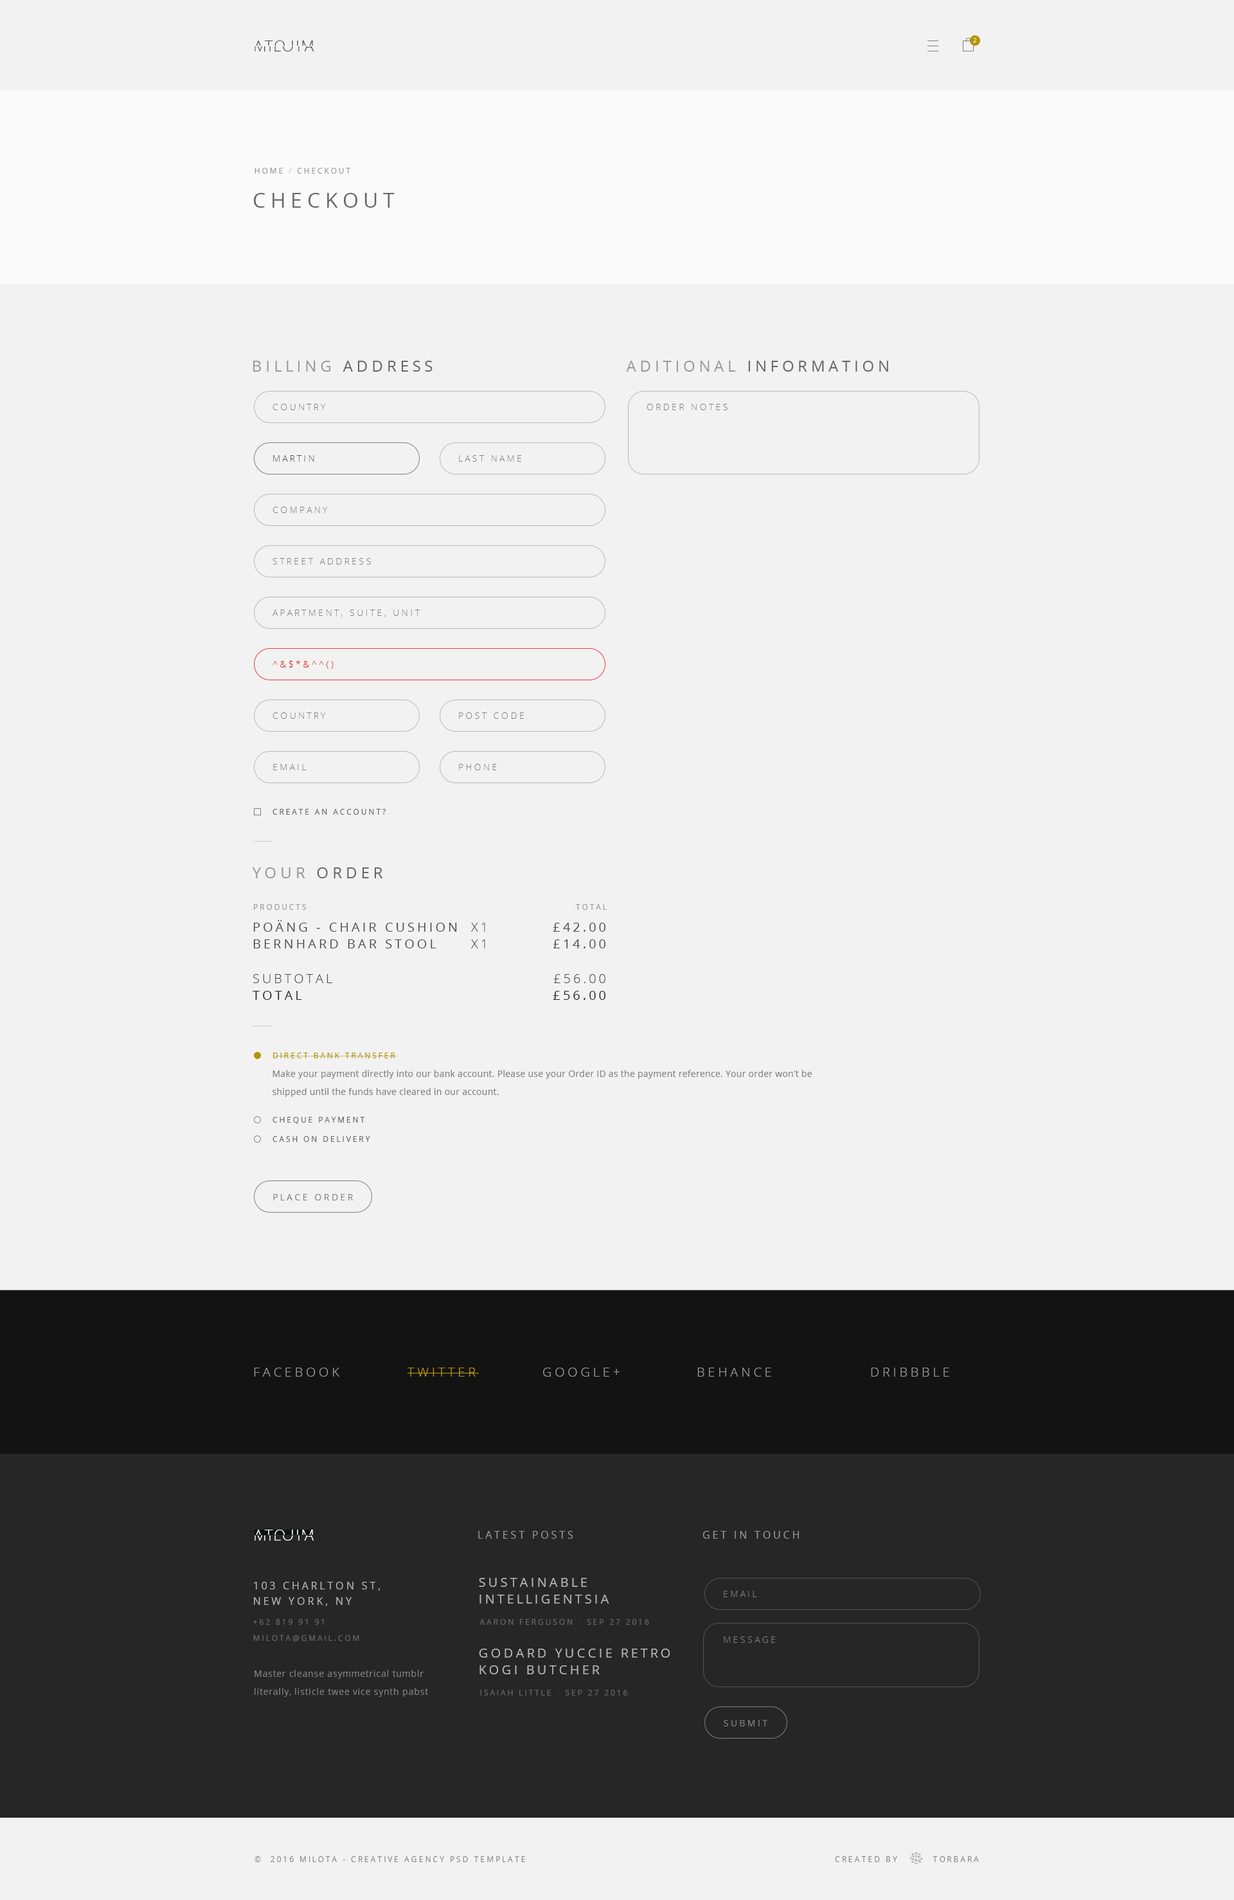
<style>
.page{position:relative;width:1234px;height:1900px;background:#f2f2f2}
.page>*{position:absolute;margin:0}
.t1{font:15.4px "OpenSans-Light";letter-spacing:0.08em;text-transform:uppercase}
.t2{font:6.4px "OpenSans-Light";letter-spacing:0.28em;color:#ffffff;text-transform:uppercase}
.t3{font:7.7px "OpenSans";letter-spacing:0.24em;color:#999999;text-transform:uppercase}
.t4{font:7.7px "OpenSans";letter-spacing:0.24em;color:#cccccc;text-transform:uppercase}
.t5{font:20.6px "OpenSans";letter-spacing:0.24em;color:#666666;text-transform:uppercase}
.t6{font:15.4px "OpenSans";letter-spacing:0.24em;color:#999999;text-transform:uppercase}
.t7{font:15.4px "OpenSans";letter-spacing:0.24em;color:#666666;text-transform:uppercase}
.t8{font:9px "OpenSans-Light";letter-spacing:0.24em;color:#808080;text-transform:uppercase}
.t9{font:9px "OpenSans-Light";letter-spacing:0.24em;color:#4d4d4d;text-transform:uppercase}
.t10{font:9px "OpenSans-Light";letter-spacing:0.24em;color:#e60000;text-transform:uppercase}
.t11{font:7.7px "OpenSans";letter-spacing:0.24em;color:#666666;text-transform:uppercase}
.t12{font:12.9px/16.7px "OpenSans";letter-spacing:0.2em;color:#4d4d4d;text-transform:uppercase}
.t13{font:12.9px/16.7px "OpenSans-Light";letter-spacing:0.2em;color:#4d4d4d;text-transform:uppercase}
.t14{font:12.9px/16.7px "OpenSans";letter-spacing:0.2em;color:#262626;text-transform:uppercase}
.t15{font:7.7px "OpenSans";letter-spacing:0.24em;color:#b39500;text-transform:uppercase}
.t16{font:9px/18px "OpenSans";letter-spacing:0.02em;color:#808080}
.t17{font:9px "OpenSans";letter-spacing:0.24em;color:#808080;text-transform:uppercase}
.t18{font:12.9px "OpenSans-Light";letter-spacing:0.24em;color:#999999;text-transform:uppercase}
.t19{font:12.9px "OpenSans-Light";letter-spacing:0.24em;color:#b39500;text-transform:uppercase}
.t20{font:10.3px "OpenSans";letter-spacing:0.24em;color:#999999;text-transform:uppercase}
.t21{font:12.9px/16.7px "OpenSans";letter-spacing:0.2em;color:#b3b3b3;text-transform:uppercase}
.t22{font:10.3px/15.4px "OpenSans";letter-spacing:0.24em;color:#b3b3b3;text-transform:uppercase}
.t23{font:7.7px "OpenSans";letter-spacing:0.24em;color:#333333;text-transform:uppercase}
.t24{font:9px/18px "OpenSans";letter-spacing:0.04em;color:#808080}
.t25{font:7.7px "OpenSans";letter-spacing:0.24em;color:#808080;text-transform:uppercase}
</style>
<div class="page">
<p class="t1" style="left:254px;top:40px;width:59px;height:11px;rotate:180deg">milota</p>
<p class="t1" style="left:255px;top:40px;width:59px;height:11px">milota</p>
<p class="t2" style="left:973px;top:38px;width:4px;height:4px">2</p>
<p class="t3" style="left:255px;top:168px;width:96px;height:6px">home <span class="t4">/</span> Checkout</p>
<p class="t5" style="left:254px;top:193px;width:141px;height:15px">Checkout</p>
<p class="t6" style="left:253px;top:361px;width:180px;height:11px">Billing <span class="t7">Address</span></p>
<p class="t7" style="left:626px;top:361px;width:262px;height:11px"><span class="t6">Aditional </span>information</p>
<p class="t8" style="left:273px;top:404px;width:53px;height:6px">Country</p>
<p class="t8" style="left:647px;top:404px;width:81px;height:6px">Order Notes</p>
<p class="t9" style="left:273px;top:455px;width:41px;height:7px">Martin</p>
<p class="t8" style="left:459px;top:455px;width:62px;height:7px">Last name</p>
<p class="t8" style="left:273px;top:507px;width:55px;height:6px">Company</p>
<p class="t8" style="left:273px;top:558px;width:98px;height:6px">Street address</p>
<p class="t8" style="left:273px;top:609px;width:147px;height:8px">Apartment, suite, unit</p>
<p class="t10" style="left:273px;top:660px;width:61px;height:9px">^&amp;$*&amp;^^()</p>
<p class="t8" style="left:273px;top:712px;width:53px;height:7px">Country</p>
<p class="t8" style="left:459px;top:712px;width:65px;height:7px">Post code</p>
<p class="t8" style="left:273px;top:764px;width:34px;height:6px">Email</p>
<p class="t8" style="left:459px;top:764px;width:38px;height:6px">Phone</p>
<p class="t11" style="left:273px;top:809px;width:113px;height:6px">Create an account?</p>
<p class="t7" style="left:252px;top:867px;width:130px;height:11px"><span class="t6">Your </span>Order</p>
<p class="t3" style="left:254px;top:904px;width:52px;height:6px">Products</p>
<p class="t3" style="left:576px;top:904px;width:31px;height:6px">Total</p>
<p class="t12" style="left:253px;top:920px;width:204px;height:28px">POÄNG - Chair cushion<br>BERNHARD Bar stool</p>
<p class="t13" style="left:471px;top:923px;width:14px;height:25px">x1<br>x1</p>
<p class="t12" style="left:554px;top:923px;width:52px;height:25px;text-align:right">£42.00<br>£14.00</p>
<p class="t13" style="left:253px;top:974px;width:79px;height:26px">Subtotal<br><span class="t14">Total</span></p>
<p class="t13" style="left:554px;top:974px;width:52px;height:26px;text-align:right">£56.00<br><span class="t14">£56.00</span></p>
<p class="t15" style="left:273px;top:1052px;width:124px;height:6px">Direct Bank Transfer</p>
<p class="t16" style="left:273px;top:1070px;width:539px;height:27px">Make your payment directly into our bank account. Please use your Order ID as the payment reference. Your order won’t be shipped until the funds have cleared in our account.</p>
<p class="t11" style="left:273px;top:1117px;width:92px;height:7px">Cheque Payment</p>
<p class="t11" style="left:273px;top:1136px;width:97px;height:6px">Cash on Delivery</p>
<p class="t17" style="left:273px;top:1194px;width:80px;height:6px">Place order</p>
<p class="t18" style="left:254px;top:1367px;width:85px;height:9px">facebook</p>
<p class="t19" style="left:408px;top:1367px;width:71px;height:9px">Twitter</p>
<p class="t18" style="left:543px;top:1367px;width:77px;height:9px">Google+</p>
<p class="t18" style="left:698px;top:1367px;width:73px;height:9px">Behance</p>
<p class="t18" style="left:871px;top:1367px;width:79px;height:9px">dribbble</p>
<p class="t1" style="left:254px;top:1529px;width:59px;height:11px;rotate:180deg">milota</p>
<p class="t1" style="left:255px;top:1529px;width:59px;height:11px">milota</p>
<p class="t20" style="left:478px;top:1531px;width:95px;height:7px">Latest posts</p>
<p class="t20" style="left:703px;top:1531px;width:96px;height:7px">Get in touch</p>
<p class="t21" style="left:479px;top:1578px;width:130px;height:25px">Sustainable intelligentsia butcher</p>
<p class="t22" style="left:254px;top:1581px;width:127px;height:25px">103 Charlton St, <br>New York, NY</p>
<p class="t8" style="left:724px;top:1590px;width:33px;height:7px">Email</p>
<p class="t11" style="left:253px;top:1619px;width:71px;height:6px">+62 819 91 91</p>
<p class="t11" style="left:480px;top:1619px;width:169px;height:6px">Aaron Ferguson <span class="t23">/</span> Sep 27 2016</p>
<p class="t11" style="left:253px;top:1635px;width:106px;height:6px">milota@gmail.com</p>
<p class="t8" style="left:724px;top:1636px;width:51px;height:7px">Message</p>
<p class="t21" style="left:479px;top:1648px;width:191px;height:26px">Godard yuccie retro kogi butcher</p>
<p class="t24" style="left:255px;top:1670px;width:173px;height:27px">Master cleanse asymmetrical tumblr literally, listicle twee vice synth pabst<br> fixie etsy squid.</p>
<p class="t11" style="left:480px;top:1689px;width:147px;height:6px">Isaiah Little <span class="t23">/</span> Sep 27 2016</p>
<p class="t17" style="left:724px;top:1720px;width:44px;height:6px">submit</p>
<p class="t25" style="left:255px;top:1856px;width:270px;height:6px">©  2016 MIlota - Creative agency psd template</p>
<p class="t25" style="left:835px;top:1856px;width:144px;height:6px">Created by         Torbara</p>
</div>
